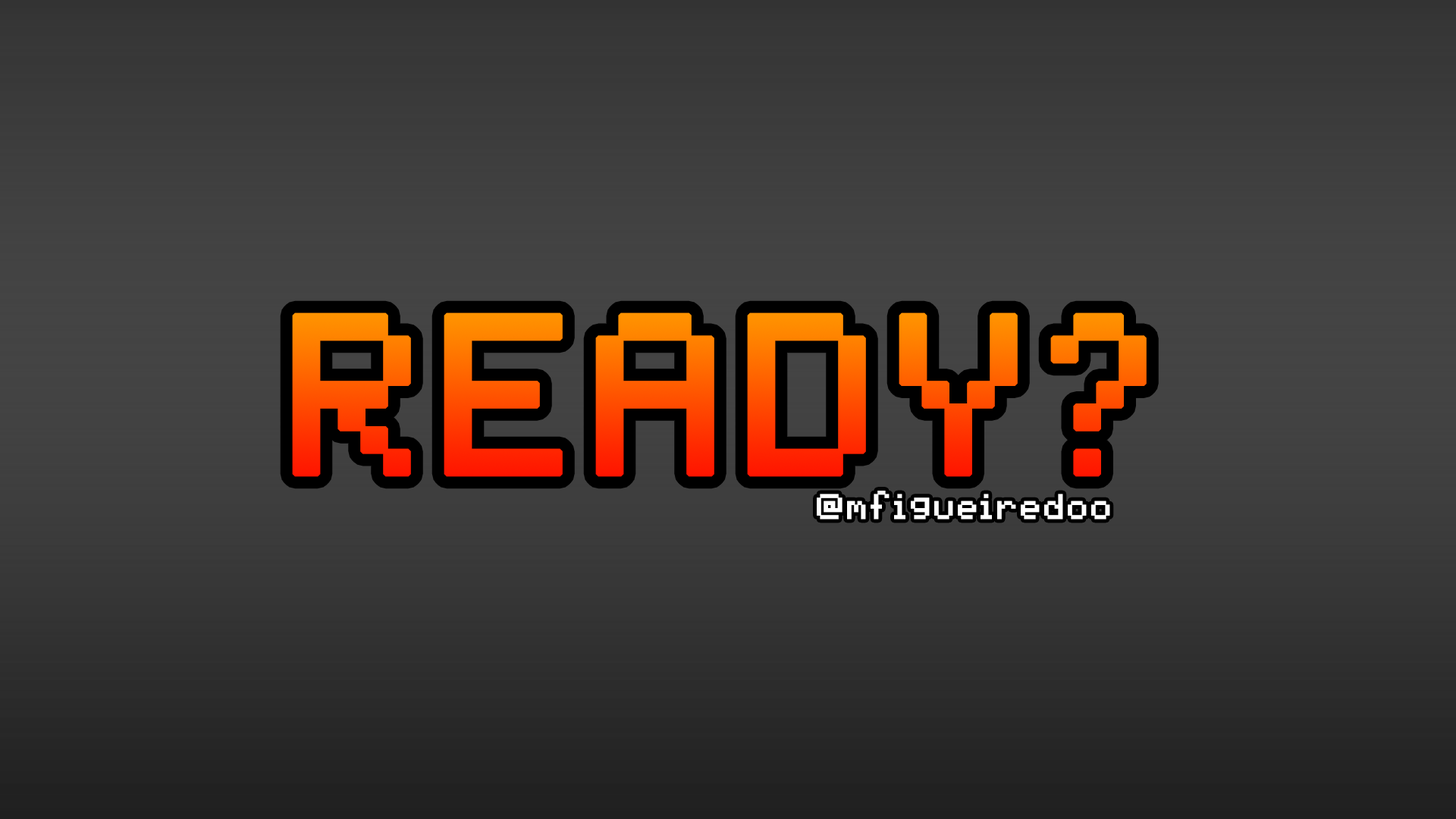
<style>
.page{position:relative;width:1456px;height:819px}
.page>*{position:absolute;margin:0}
.t1{font:181px "pixelmix";letter-spacing:0.06em;font-weight:bold}
.t2{font:28px "pixelmix";letter-spacing:0.06em;color:#ffffff;font-weight:bold}
</style>
<div class="page">
<p class="t1" style="left:292px;top:312px;width:855px;height:165px">READY?</p>
<p class="t2" style="left:817px;top:491px;width:293px;height:28px">@mfigueiredoo</p>
</div>
